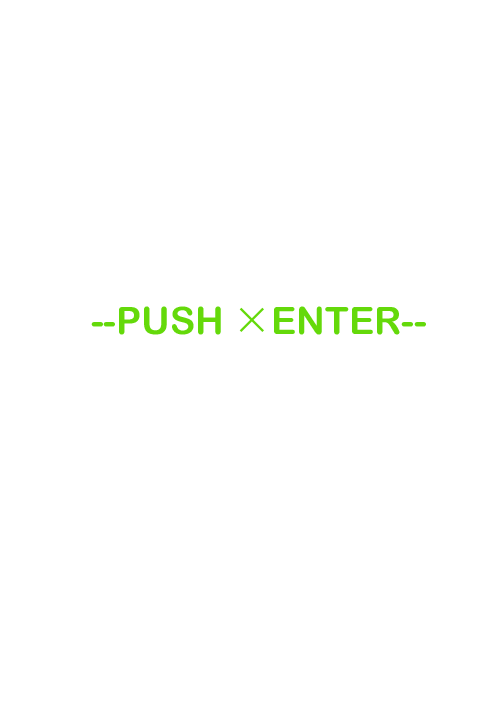
<style>
.page{position:relative;width:500px;height:707px;background:#ffffff}
.page>*{position:absolute;margin:0}
.t1{font:37.8px "ArialRoundedMTBold";color:#64d90a}
.t2{font:37.8px "KozGoPr6N-Regular";color:#64d90a}
</style>
<div class="page">
<p class="t1" style="left:91px;top:306px;width:335px;height:29px">--PUSH <span class="t2">×</span>ENTER--</p>
</div>
